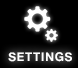
<style>
.page{position:relative;width:78px;height:68px;background:#000000}
.page>*{position:absolute;margin:0}
.t1{font:12.1px "AlteHaasGrotesk_Bold";letter-spacing:0.05em;color:#ffffff}
</style>
<div class="page">
<p class="t1" style="left:8px;top:52px;width:64px;height:10px">SETTINGS</p>
</div>
